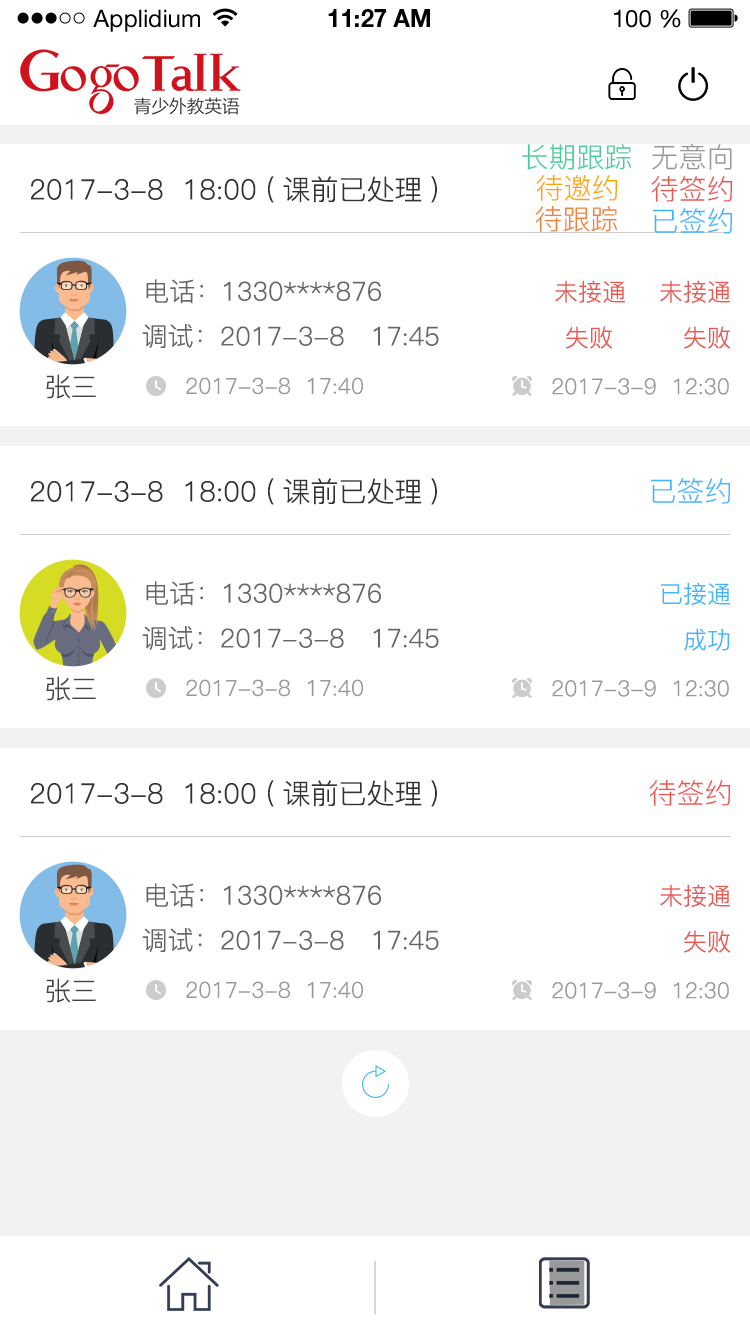
<style>
.page{position:relative;width:750px;height:1334px;background:#ffffff}
.page>*{position:absolute;margin:0}
.t1{font:24px "HelveticaNeueLTStd-Roman";color:#000000}
.t2{font:24px "HelveticaNeueLTStd-Bd";color:#000000}
.t3{font:28px "PingFang-SC-Regular";color:#4bcda0}
.t4{font:28px "PingFang-SC-Regular";color:#999999}
.t5{font:28px "PingFang-SC-Regular";color:#fca600}
.t6{font:28px "PingFang-SC-Regular";color:#333333}
.t7{font:28px "PingFang-SC-Regular";color:#ea5851}
.t8{font:28px "PingFang-SC-Regular";color:#f0823a}
.t9{font:28px "PingFang-SC-Regular";color:#3db6ff}
.t10{font:26px "PingFang-SC-Regular";color:#666666}
.t11{font:24px "PingFang-SC-Regular";color:#ea5851}
.t12{font:26px "PingFang-SC-Regular";color:#333333}
.t13{font:22px "PingFang-SC-Regular";color:#999999}
.t14{font:24px "PingFang-SC-Regular";color:#3db6ff}
</style>
<div class="page">
<p class="t1" style="left:93px;top:9px;width:107px;height:23px">Applidium</p>
<p class="t2" style="left:328px;top:9px;width:102px;height:18px">11:27 AM</p>
<p class="t1" style="left:614px;top:9px;width:67px;height:19px">100 %</p>
<p class="t3" style="left:522px;top:144px;width:110px;height:26px">长期跟踪</p>
<p class="t4" style="left:652px;top:143px;width:80px;height:27px">无意向</p>
<p class="t5" style="left:536px;top:174px;width:82px;height:27px">待邀约</p>
<p class="t6" style="left:30px;top:176px;width:407px;height:27px">2017-3-8  18:00 (课前已处理)</p>
<p class="t7" style="left:651px;top:175px;width:82px;height:27px">待签约</p>
<p class="t8" style="left:535px;top:205px;width:83px;height:27px">待跟踪</p>
<p class="t9" style="left:652px;top:208px;width:81px;height:26px">已签约</p>
<p class="t10" style="left:146px;top:279px;width:235px;height:25px">电话：1330****876</p>
<p class="t11" style="left:555px;top:280px;width:70px;height:23px">未接通</p>
<p class="t11" style="left:660px;top:280px;width:70px;height:23px">未接通</p>
<p class="t10" style="left:142px;top:324px;width:297px;height:24px">调试：2017-3-8   17:45</p>
<p class="t11" style="left:566px;top:326px;width:46px;height:23px">失败</p>
<p class="t11" style="left:684px;top:326px;width:46px;height:23px">失败</p>
<p class="t12" style="left:46px;top:374px;width:50px;height:25px;opacity:0.95">张三</p>
<p class="t13" style="left:186px;top:377px;width:177px;height:18px">2017-3-8  17:40</p>
<p class="t13" style="left:552px;top:378px;width:177px;height:17px">2017-3-9  12:30</p>
<p class="t6" style="left:30px;top:478px;width:407px;height:27px">2017-3-8  18:00 (课前已处理)</p>
<p class="t9" style="left:650px;top:478px;width:81px;height:26px">已签约</p>
<p class="t10" style="left:146px;top:581px;width:235px;height:25px">电话：1330****876</p>
<p class="t14" style="left:661px;top:582px;width:69px;height:23px">已接通</p>
<p class="t10" style="left:142px;top:626px;width:297px;height:24px">调试：2017-3-8   17:45</p>
<p class="t14" style="left:684px;top:628px;width:46px;height:23px">成功</p>
<p class="t12" style="left:46px;top:676px;width:50px;height:25px;opacity:0.95">张三</p>
<p class="t13" style="left:186px;top:679px;width:177px;height:18px">2017-3-8  17:40</p>
<p class="t13" style="left:552px;top:680px;width:177px;height:17px">2017-3-9  12:30</p>
<p class="t6" style="left:30px;top:780px;width:407px;height:27px">2017-3-8  18:00 (课前已处理)</p>
<p class="t7" style="left:649px;top:779px;width:82px;height:27px">待签约</p>
<p class="t10" style="left:146px;top:883px;width:235px;height:25px">电话：1330****876</p>
<p class="t11" style="left:660px;top:884px;width:70px;height:23px">未接通</p>
<p class="t10" style="left:142px;top:928px;width:297px;height:24px">调试：2017-3-8   17:45</p>
<p class="t11" style="left:684px;top:930px;width:46px;height:23px">失败</p>
<p class="t12" style="left:46px;top:978px;width:50px;height:25px;opacity:0.95">张三</p>
<p class="t13" style="left:186px;top:981px;width:177px;height:18px">2017-3-8  17:40</p>
<p class="t13" style="left:552px;top:982px;width:177px;height:17px">2017-3-9  12:30</p>
</div>
